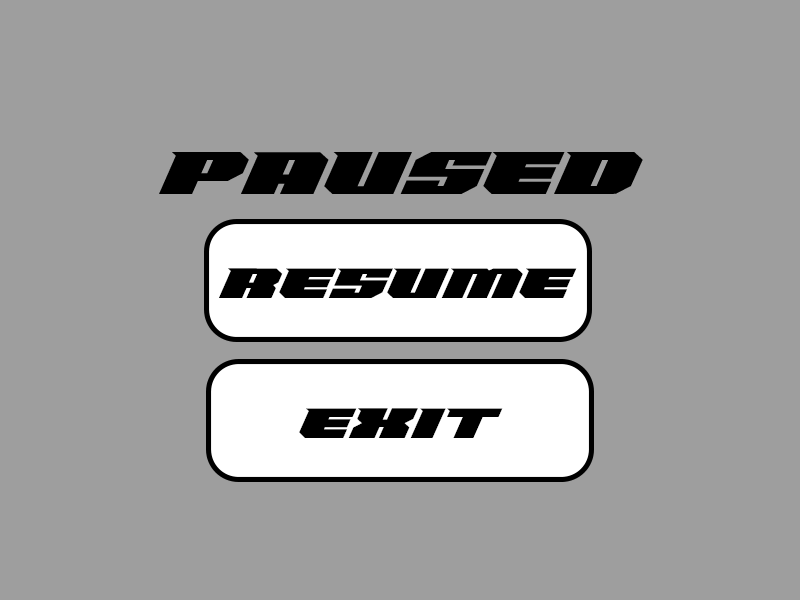
<style>
.page{position:relative;width:800px;height:600px;background:#9e9e9e}
.page>*{position:absolute;margin:0}
.t1{font:63.7px "HighSwift-Regular";color:#000000}
.t2{font:45px "HighSwift-Regular";color:#000000}
</style>
<div class="page">
<p class="t1" style="left:159px;top:152px;width:484px;height:42px">PAUsED</p>
<p class="t2" style="left:219px;top:268px;width:358px;height:30px">RESUME</p>
<p class="t2" style="left:299px;top:408px;width:204px;height:30px">EXIT</p>
</div>
